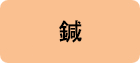
<style>
.page{position:relative;width:140px;height:63px;background:#fac090}
.page>*{position:absolute;margin:0}
.t1{font:24px "HGSGothicE";letter-spacing:0.065em;color:#000000}
</style>
<div class="page">
<p class="t1" style="left:59px;top:20px;width:23px;height:23px">鍼</p>
</div>
